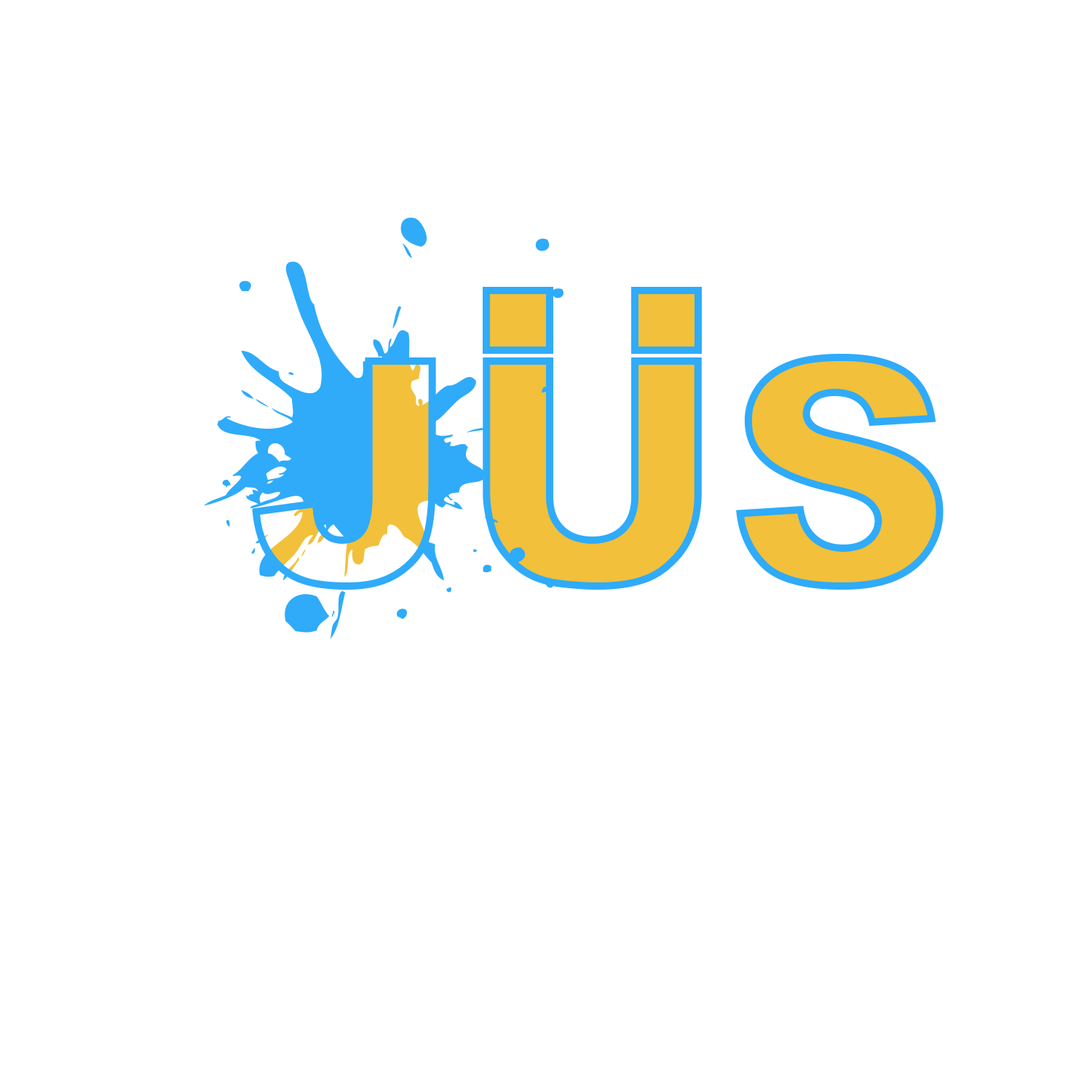
<style>
.page{position:relative;width:1092px;height:1092px;background:#ffffff}
.page>*{position:absolute;margin:0}
.t1{font:318.7px "Arial-Black";color:#f2c03a}
.t2{font:318.7px "Arial-Black"}
</style>
<div class="page">
<p class="t1" style="left:483px;top:354px;width:460px;height:236px">US</p>
<p class="t2" style="left:252px;top:357px;width:184px;height:233px">J</p>
<p class="t2" style="left:252px;top:357px;width:184px;height:233px">J</p>
</div>
